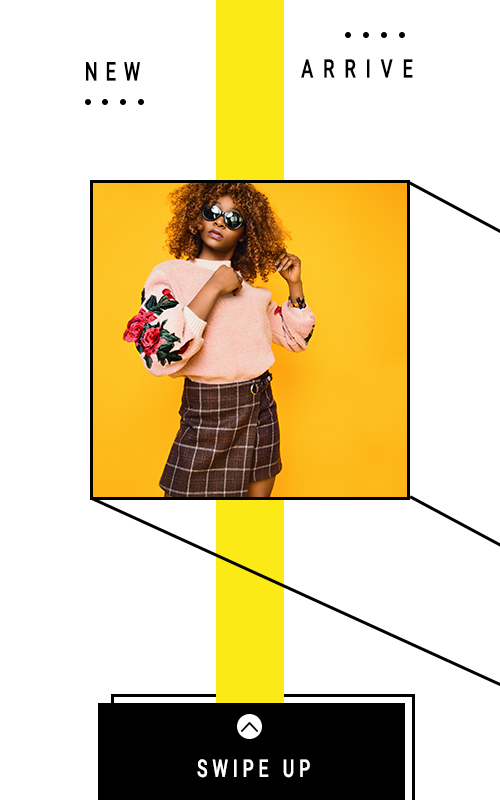
<style>
.page{position:relative;width:500px;height:800px;background:#ffffff}
.page>*{position:absolute;margin:0}
.t1{font:25px "Roboto-Regular";letter-spacing:0.42em;color:#000000;text-transform:uppercase;font-weight:bold;scale:0.72 1}
.t2{font:25px "Roboto-Regular";letter-spacing:0.54em;color:#000000;text-transform:uppercase;font-weight:bold;scale:0.72 1}
.t3{font:23.6px "Roboto-Regular";letter-spacing:0.28em;color:#ffffff;text-transform:uppercase;font-weight:bold;scale:0.72 1}
</style>
<div class="page">
<p class="t1" style="left:86px;top:62px;width:54px;height:19px">NEW</p>
<p class="t2" style="left:301px;top:59px;width:112px;height:19px">ARRIVE</p>
<p class="t3" style="left:197px;top:759px;width:113px;height:19px">SWIPE UP</p>
</div>
